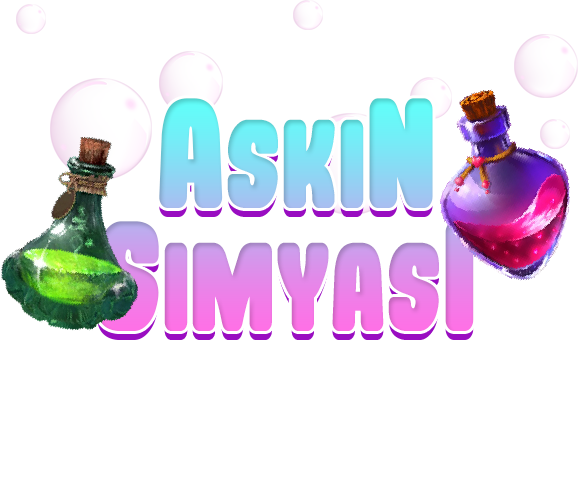
<style>
.page{position:relative;width:583px;height:477px;background:#ffffff}
.page>*{position:absolute;margin:0}
.t1{font:109.1px "Rockin'-Record";scale:0.78 1}
.t2{font:135.7px "Rockin'-Record";scale:0.78 1}
</style>
<div class="page">
<p class="t1" style="left:96px;top:98px;width:378px;height:233px;text-align:center"><span class="t2">A</span>ski<span class="t2">N<br>s</span>imyas<span class="t2">I</span></p>
<p class="t1" style="left:96px;top:107px;width:378px;height:233px;text-align:center"><span class="t2">A</span>ski<span class="t2">N<br>s</span>imyas<span class="t2">I</span></p>
</div>
